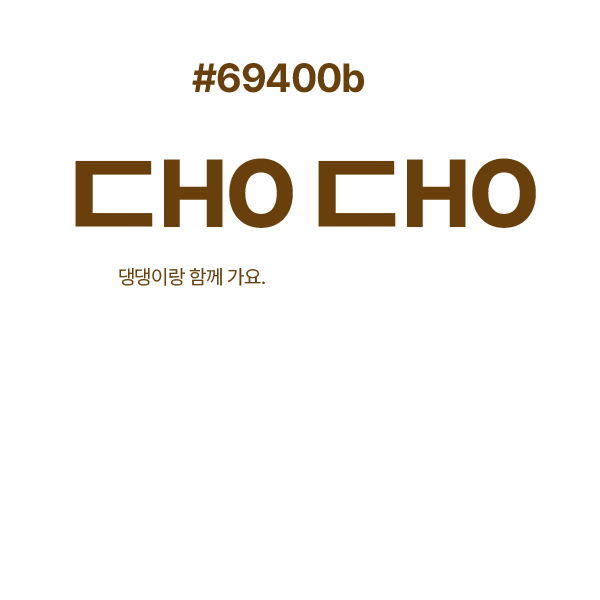
<style>
.page{position:relative;width:600px;height:600px;background:#ffffff}
.page>*{position:absolute;margin:0}
.t1{font:40.4px "Pretendard-Bold";letter-spacing:-0.025em;color:#69400b}
.t2{font:136.6px "Pretendard-Bold";letter-spacing:-0.025em;color:#69400b}
.t3{font:95.6px "Pretendard-ExtraBold";letter-spacing:-0.025em;color:#69400b}
.t4{font:20.2px "Pretendard-Regular";letter-spacing:-0.025em;color:#69400b}
</style>
<div class="page">
<p class="t1" style="left:192px;top:63px;width:172px;height:30px">#69400b</p>
<p class="t2" style="left:75px;top:160px;width:78px;height:67px">ㄷ</p>
<p class="t3" style="left:164px;top:158px;width:129px;height:70px">HO</p>
<p class="t2" style="left:318px;top:160px;width:78px;height:67px">ㄷ</p>
<p class="t3" style="left:407px;top:158px;width:129px;height:70px">HO</p>
<p class="t4" style="left:119px;top:268px;width:146px;height:18px">댕댕이랑 함께 가요.</p>
</div>
